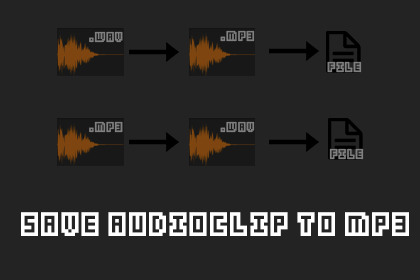
<style>
.page{position:relative;width:420px;height:280px;background:#232323}
.page>*{position:absolute;margin:0}
.t1{font:11.5px "Kenney-Blocks";color:#7f7f7f}
.t2{font:27px "Kenney-Blocks";color:#ffffff}
</style>
<div class="page">
<p class="t1" style="left:220px;top:30px;width:35px;height:12px">.mp3</p>
<p class="t1" style="left:89px;top:31px;width:34px;height:12px">.wav</p>
<p class="t1" style="left:327px;top:61px;width:35px;height:12px">file</p>
<p class="t1" style="left:89px;top:121px;width:34px;height:12px">.mp3</p>
<p class="t1" style="left:220px;top:121px;width:35px;height:12px">.wav</p>
<p class="t1" style="left:329px;top:148px;width:35px;height:12px">file</p>
<p class="t2" style="left:21px;top:212px;width:388px;height:24px">Save AudioClip to MP3</p>
</div>
